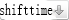
<style>
.page{position:relative;width:69px;height:20px;background:#ffffff}
.page>*{position:absolute;margin:0}
.t1{font:16.4px "SimSun";color:#000000;scale:0.73 1}
</style>
<div class="page">
<p class="t1" style="left:0px;top:3px;width:53px;height:12px">shifttime</p>
</div>
